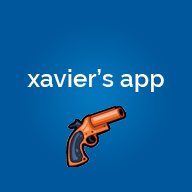
<style>
.page{position:relative;width:192px;height:192px;background:#01579b}
.page>*{position:absolute;margin:0}
.t1{font:24px "Raleway-SemiBold";letter-spacing:0.01em;color:#ffffff}
</style>
<div class="page">
<p class="t1" style="left:27px;top:69px;width:137px;height:23px">xavier’s app</p>
</div>
